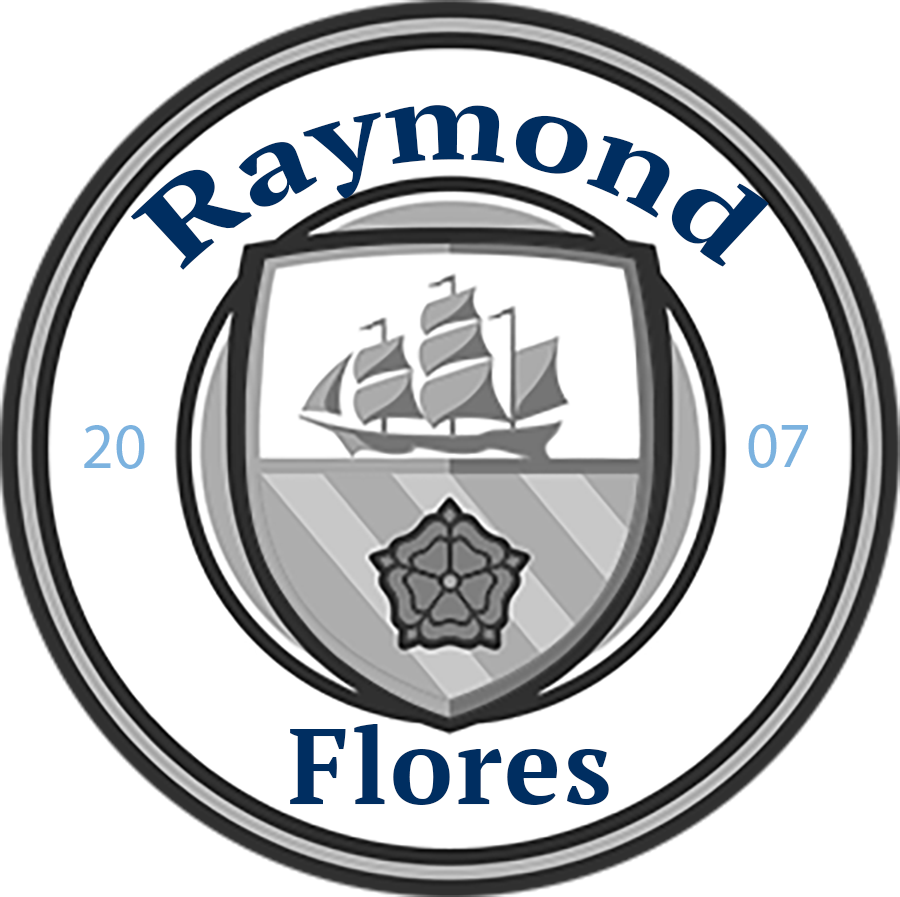
<style>
.page{position:relative;width:900px;height:897px;background:#ffffff}
.page>*{position:absolute;margin:0}
.t1{font:106.5px "PTSerif-Bold";letter-spacing:0.025em;color:#002e61}
.t2{font:63.9px "MyriadPro-Regular";color:#7bb2df}
</style>
<div class="page">
<p class="t1" style="left:130px;top:105px;width:639px;height:165px">Raymond</p>
<p class="t2" style="left:84px;top:425px;width:61px;height:44px">20</p>
<p class="t2" style="left:748px;top:424px;width:60px;height:44px">07</p>
<p class="t1" style="left:290px;top:724px;width:319px;height:81px">Flores</p>
</div>
